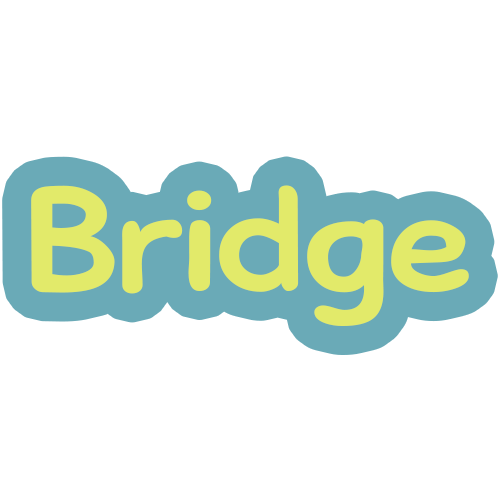
<style>
.page{position:relative;width:500px;height:500px;background:#ffffff}
.page>*{position:absolute;margin:0}
.t1{font:134.5px "Kronika";color:#e2ea6a;scale:1.05 1}
</style>
<div class="page">
<p class="t1" style="left:31px;top:185px;width:438px;height:141px">Bridge</p>
</div>
